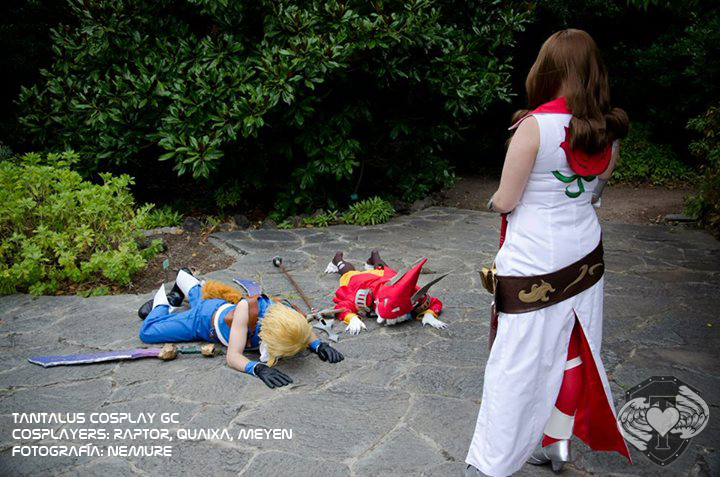
<style>
.page{position:relative;width:720px;height:477px}
.page>*{position:absolute;margin:0}
.t1{font:14px "NasalizationRg-Regular";color:#ffffff}
</style>
<div class="page">
<p class="t1" style="left:12px;top:413px;width:280px;height:43px">TANTALUS COSPLAY GC<br>COSPLAYERS: RAPTOR, QUAIXA, MEYEN<br>FOTOGRAFÍA: NEMURE</p>
</div>
